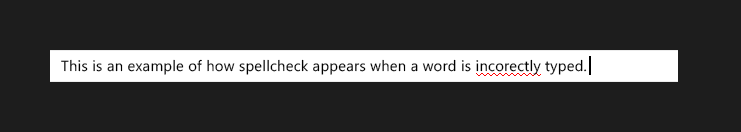
<style>
.page{position:relative;width:741px;height:132px;background:#1d1d1d}
.page>*{position:absolute;margin:0}
.t1{font:14.7px "SegoeUI";letter-spacing:0.02em;color:#000000}
</style>
<div class="page">
<p class="t1" style="left:61px;top:59px;width:526px;height:16px">This is an example of how spellcheck appears when a word is incorectly typed.</p>
</div>
